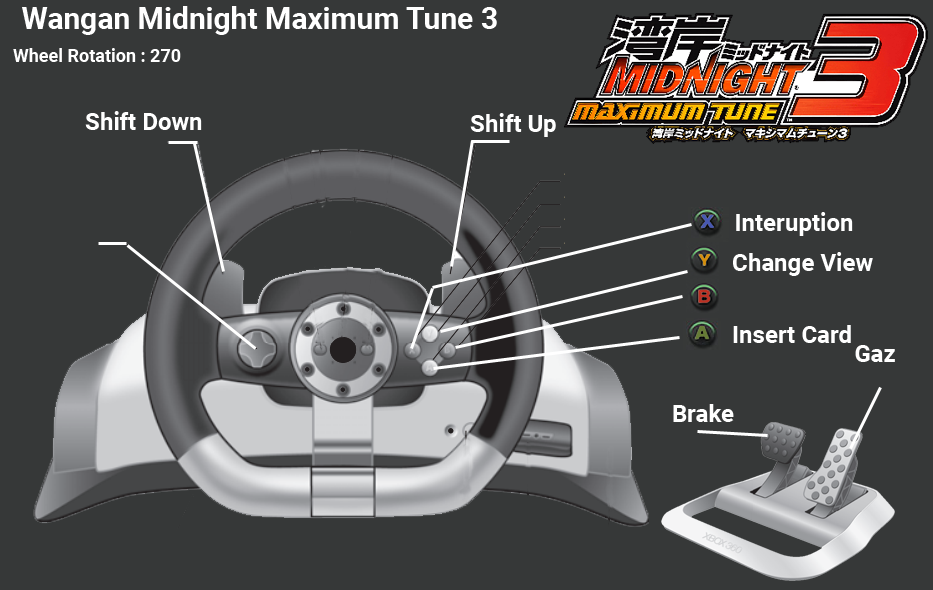
<style>
.page{position:relative;width:933px;height:590px;background:#363838}
.page>*{position:absolute;margin:0}
.t1{font:30px "Roboto-Bold";color:#ffffff}
.t2{font:18px "Roboto-Bold";color:#ffffff}
.t3{font:24px "Roboto-Bold";color:#ffffff}
</style>
<div class="page">
<p class="t1" style="left:22px;top:6px;width:475px;height:29px">Wangan Midnight Maximum Tune 3</p>
<p class="t2" style="left:13px;top:48px;width:168px;height:14px">Wheel Rotation : 270</p>
<p class="t3" style="left:85px;top:111px;width:117px;height:19px">Shift Down</p>
<p class="t3" style="left:470px;top:113px;width:86px;height:24px">Shift Up</p>
<p class="t3" style="left:736px;top:212px;width:117px;height:24px">Interuption</p>
<p class="t3" style="left:733px;top:252px;width:140px;height:24px">Change View</p>
<p class="t3" style="left:733px;top:325px;width:118px;height:18px">Insert Card</p>
<p class="t3" style="left:855px;top:345px;width:40px;height:17px">Gaz</p>
<p class="t3" style="left:673px;top:404px;width:61px;height:18px">Brake</p>
</div>
